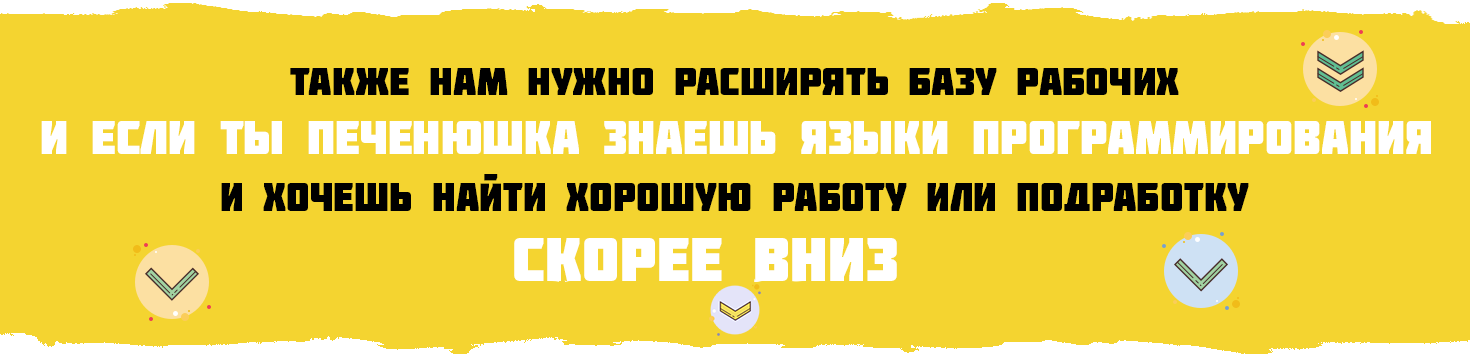
<style>
.page{position:relative;width:1470px;height:360px;background:#f4d430}
.page>*{position:absolute;margin:0}
.t1{font:39px "Molot";color:#000000}
.t2{font:46.7px "Molot";color:#ffffff}
.t3{font:39.3px "Molot";color:#000000}
.t4{font:61.9px "Molot";color:#ffffff}
</style>
<div class="page">
<p class="t1" style="left:290px;top:68px;width:889px;height:27px">также нам нужно расширять базу рабочих</p>
<p class="t2" style="left:41px;top:121px;width:1390px;height:33px">и если ты печенюшка знаешь языки программирования</p>
<p class="t3" style="left:221px;top:174px;width:1028px;height:37px">и хочешь найти хорошую работу или подработку</p>
<p class="t4" style="left:514px;top:238px;width:383px;height:43px">скорее вниз</p>
</div>
